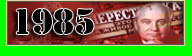
<style>
.page{position:relative;width:192px;height:56px;background:#00ff00}
.page>*{position:absolute;margin:0}
.t1{font:33.3px "StencilStd";color:#000000}
</style>
<div class="page">
<p class="t1" style="left:16px;top:9px;width:78px;height:25px">1985</p>
</div>
